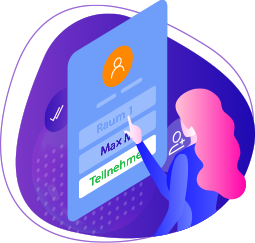
<style>
.page{position:relative;width:255px;height:243px;background:#ffffff}
.page>*{position:absolute;margin:0}
.t1{font:12px "MyriadPro-Regular";color:#3a17b8;scale:1.15 1}
.t2{font:12px "MyriadPro-Regular";color:#24bf4b;scale:1.15 1}
</style>
<div class="page">
<p class="t1" style="left:101px;top:130px;width:35px;height:26px;rotate:-30deg">Max M.</p>
<p class="t1" style="left:101px;top:130px;width:35px;height:26px;rotate:-30deg">Max M.</p>
<p class="t1" style="left:101px;top:130px;width:35px;height:26px;rotate:-30deg">Max M.</p>
<p class="t1" style="left:101px;top:130px;width:35px;height:26px;rotate:-30deg">Max M.</p>
<p class="t2" style="left:89px;top:148px;width:59px;height:38px;rotate:-30deg">Teilnehmen</p>
<p class="t2" style="left:89px;top:148px;width:59px;height:38px;rotate:-30deg">Teilnehmen</p>
<p class="t2" style="left:89px;top:148px;width:59px;height:38px;rotate:-30deg">Teilnehmen</p>
<p class="t2" style="left:89px;top:148px;width:59px;height:38px;rotate:-30deg">Teilnehmen</p>
</div>
